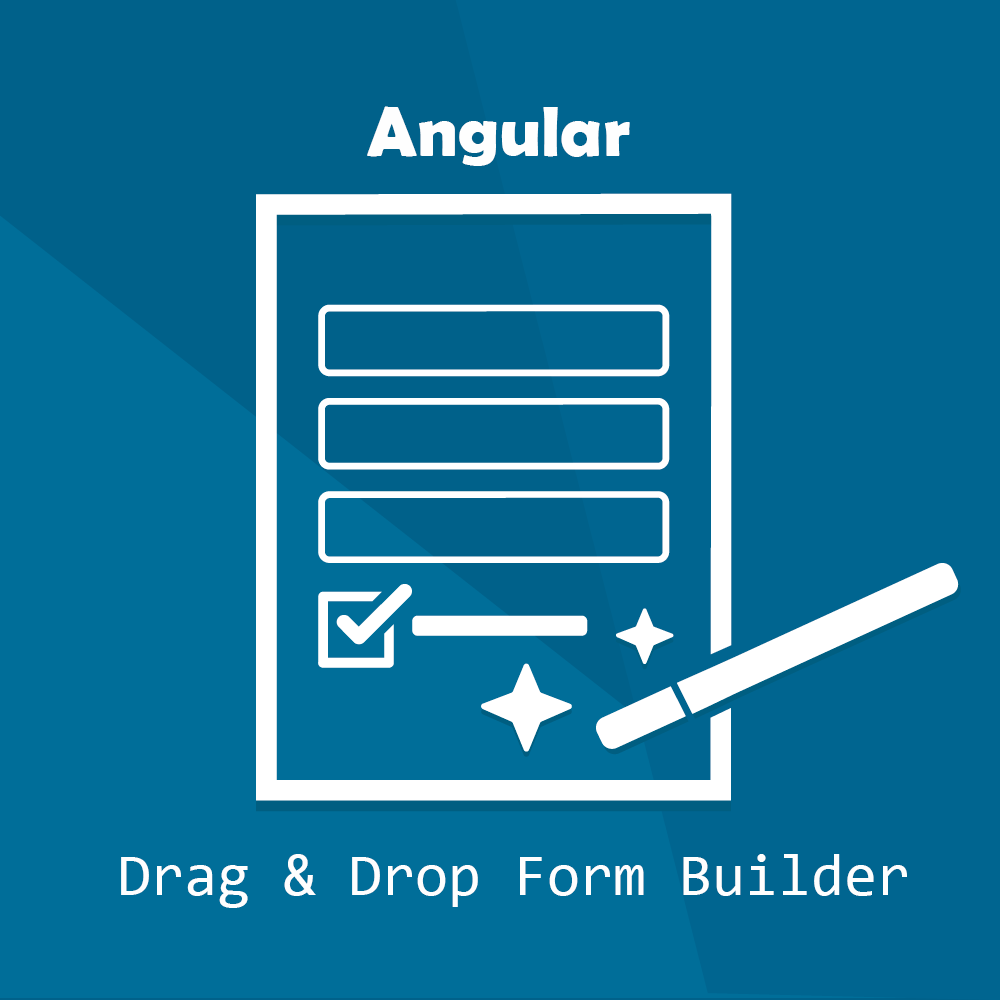
<style>
.page{position:relative;width:1000px;height:1000px;background:#006590}
.page>*{position:absolute;margin:0}
.t1{font:72px "BerlinSansFBDemi-Bold";color:#fefefe}
.t2{font:60px "Consolas";color:#fefefe}
</style>
<div class="page">
<p class="t1" style="left:367px;top:106px;width:263px;height:60px">Angular</p>
<p class="t2" style="left:121px;top:854px;width:786px;height:54px">Drag &amp; Drop Form Builder</p>
</div>
